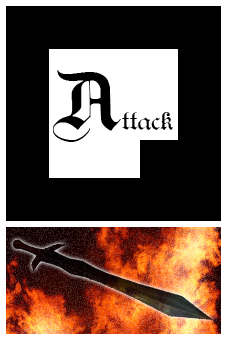
<style>
.page{position:relative;width:227px;height:340px;background:#000000}
.page>*{position:absolute;margin:0}
.t1{font:24px "TeutonicNo1-DemiBold";color:#000000}
.t2{font:80px "TeutonicNo1-DemiBold";color:#000000}
</style>
<div class="page">
<p class="t1" style="left:52px;top:70px;width:121px;height:72px"><span class="t2">A</span>ttack</p>
</div>
